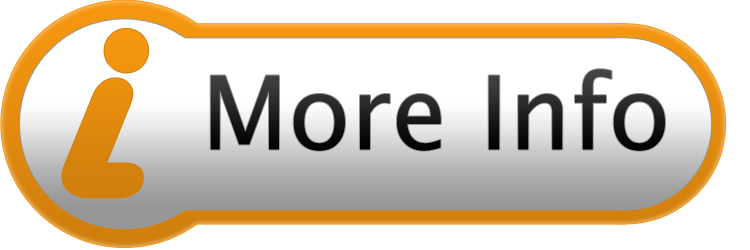
<style>
.page{position:relative;width:750px;height:250px;background:#ffffff}
.page>*{position:absolute;margin:0}
.t1{font:318px "HarlowSolid";color:#dd870e}
.t2{font:102px "LucidaSansUnicode";color:#222222}
</style>
<div class="page">
<p class="t1" style="left:62px;top:29px;width:86px;height:169px">i</p>
<p class="t2" style="left:210px;top:69px;width:455px;height:82px">More Info</p>
</div>
